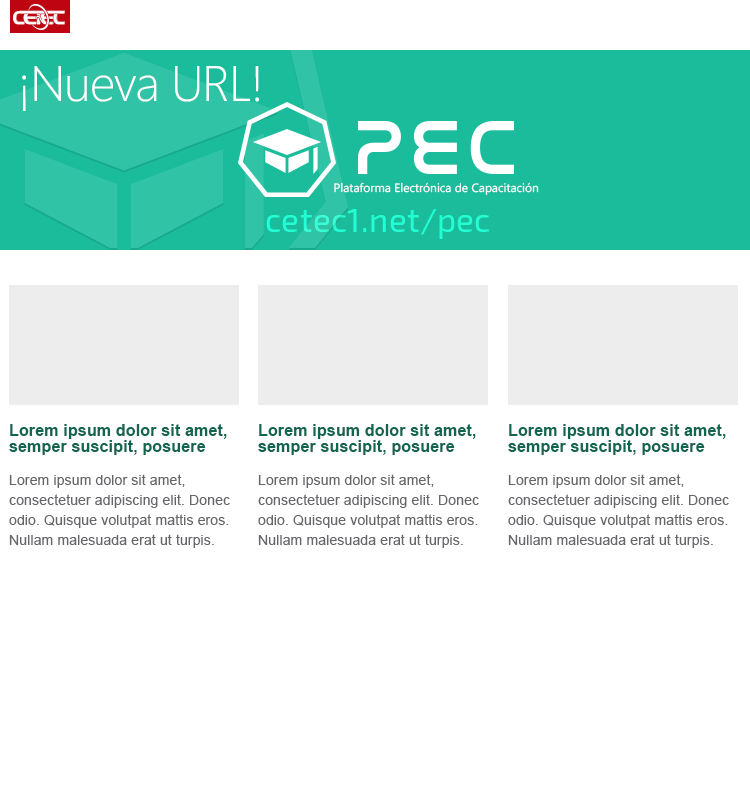
<style>
.page{position:relative;width:750px;height:800px;background:#ffffff}
.page>*{position:absolute;margin:0}
.t1{font:50px "SegoeUI-Light";letter-spacing:-0.025em;color:#ffffff}
.t2{font:12px "SegoeUI";color:#ffffff}
.t3{font:33.3px "Exo2-Regular";letter-spacing:0.01em;color:#23ffd4}
.t4{font:16px/16px "Arial-BoldMT";letter-spacing:0.01em;color:#116551}
.t5{font:14px/20px "ArialMT";letter-spacing:0.01em;color:#67666a}
</style>
<div class="page">
<p class="t1" style="left:22px;top:66px;width:237px;height:45px">¡Nueva URL!</p>
<p class="t2" style="left:334px;top:182px;width:205px;height:13px">Plataforma Electrónica de Capacitación</p>
<p class="t3" style="left:266px;top:209px;width:223px;height:30px">cetec1.net/pec</p>
<p class="t4" style="left:9px;top:424px;width:218px;height:31px">Lorem ipsum dolor sit amet, semper suscipit, posuere</p>
<p class="t4" style="left:258px;top:424px;width:218px;height:31px">Lorem ipsum dolor sit amet, semper suscipit, posuere</p>
<p class="t4" style="left:508px;top:424px;width:218px;height:31px">Lorem ipsum dolor sit amet, semper suscipit, posuere</p>
<p class="t5" style="left:9px;top:474px;width:221px;height:74px">Lorem ipsum dolor sit amet, consectetuer adipiscing elit. Donec odio. Quisque volutpat mattis eros. Nullam malesuada erat ut turpis. Suspendisse urna nibh, viverra non, semper suscipit, posuere a, pede.</p>
<p class="t5" style="left:258px;top:474px;width:221px;height:74px">Lorem ipsum dolor sit amet, consectetuer adipiscing elit. Donec odio. Quisque volutpat mattis eros. Nullam malesuada erat ut turpis. Suspendisse urna nibh, viverra non, semper suscipit, posuere a, pede.</p>
<p class="t5" style="left:508px;top:474px;width:221px;height:74px">Lorem ipsum dolor sit amet, consectetuer adipiscing elit. Donec odio. Quisque volutpat mattis eros. Nullam malesuada erat ut turpis. Suspendisse urna nibh, viverra non, semper suscipit, posuere a, pede.</p>
</div>
